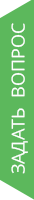
<style>
.page{position:relative;width:34px;height:200px;background:#5cb85c}
.page>*{position:absolute;margin:0}
.t1{font:18px "OpenSans";color:#ffffff}
</style>
<div class="page">
<p class="t1" style="left:11px;top:23px;width:17px;height:151px;rotate:-90deg">ЗАДАТЬ  ВОПРОС</p>
</div>
